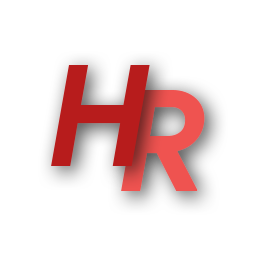
<style>
.page{position:relative;width:256px;height:256px;background:#ffffff}
.page>*{position:absolute;margin:0}
.t1{font:141.2px "ProductSans-BoldItalic";letter-spacing:-0.22em;color:#b71c1c}
.t2{font:141.2px "ProductSans-BoldItalic";letter-spacing:-0.22em;color:#ef5350}
</style>
<div class="page">
<p class="t1" style="left:51px;top:65px;width:99px;height:101px">H</p>
<p class="t2" style="left:121px;top:90px;width:84px;height:101px">R</p>
</div>
